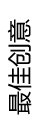
<style>
.page{position:relative;width:40px;height:130px;background:#ffffff}
.page>*{position:absolute;margin:0}
.t1{font:24px "MicrosoftYaHei";color:#000000}
</style>
<div class="page">
<p class="t1" style="left:7px;top:19px;width:25px;height:96px;rotate:-90deg">最佳创意</p>
</div>
